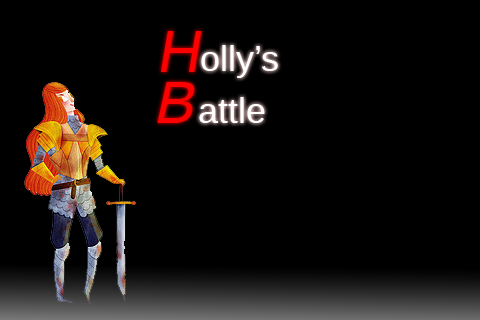
<style>
.page{position:relative;width:480px;height:320px;background:#000000}
.page>*{position:absolute;margin:0}
.t1{font:36px "LiberationSans";color:#ffffff}
</style>
<div class="page">
<p class="t1" style="left:201px;top:45px;width:77px;height:33px">olly’s</p>
<p class="t1" style="left:199px;top:97px;width:66px;height:26px">attle</p>
</div>
